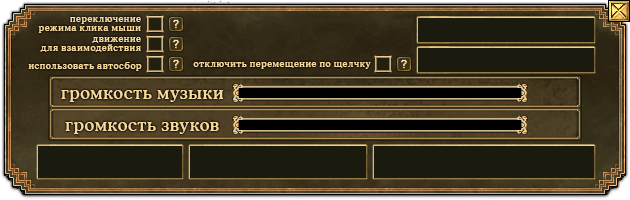
<style>
.page{position:relative;width:630px;height:200px}
.page>*{position:absolute;margin:0}
.t1{font:9.3px/9px "CooperMediumCBT";letter-spacing:0.04em;color:#f8d99c}
.t2{font:9.3px "CooperMediumCBT";letter-spacing:0.04em;color:#f8d99c}
.t3{font:16.7px "CooperMediumCBT";letter-spacing:0.04em;color:#f8d99c}
</style>
<div class="page">
<p class="t1" style="left:38px;top:17px;width:103px;height:16px;text-align:right">переключение<br>режима клика мыши</p>
<p class="t1" style="left:40px;top:37px;width:101px;height:15px;text-align:right">движение<br>для взаимодействия</p>
<p class="t2" style="left:28px;top:62px;width:114px;height:9px">использовать автосбор</p>
<p class="t2" style="left:193px;top:62px;width:178px;height:7px">отключить перемещение по щелчку</p>
<p class="t3" style="left:61px;top:90px;width:163px;height:12px">громкость музыки</p>
<p class="t3" style="left:65px;top:122px;width:154px;height:12px">громкость звуков</p>
</div>
